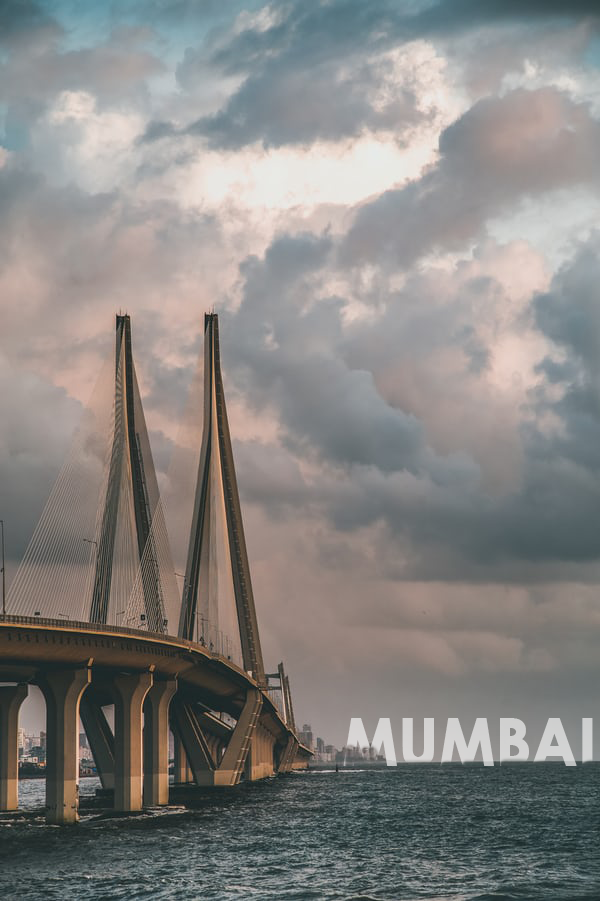
<style>
.page{position:relative;width:600px;height:901px}
.page>*{position:absolute;margin:0}
.t1{font:65.2px "CenturyGothic-Bold";color:#d3d2d2;font-weight:bold;scale:0.93 1}
</style>
<div class="page">
<p class="t1" style="left:343px;top:718px;width:250px;height:49px">MUMBAI</p>
</div>
